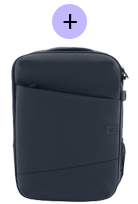
<style>
.page{position:relative;width:138px;height:204px;background:#ffffff}
.page>*{position:absolute;margin:0}
.t1{font:30px "FormaDJRMicro-Regular";color:#000000}
</style>
<div class="page">
<p class="t1" style="left:63px;top:14px;width:14px;height:15px">+</p>
</div>
